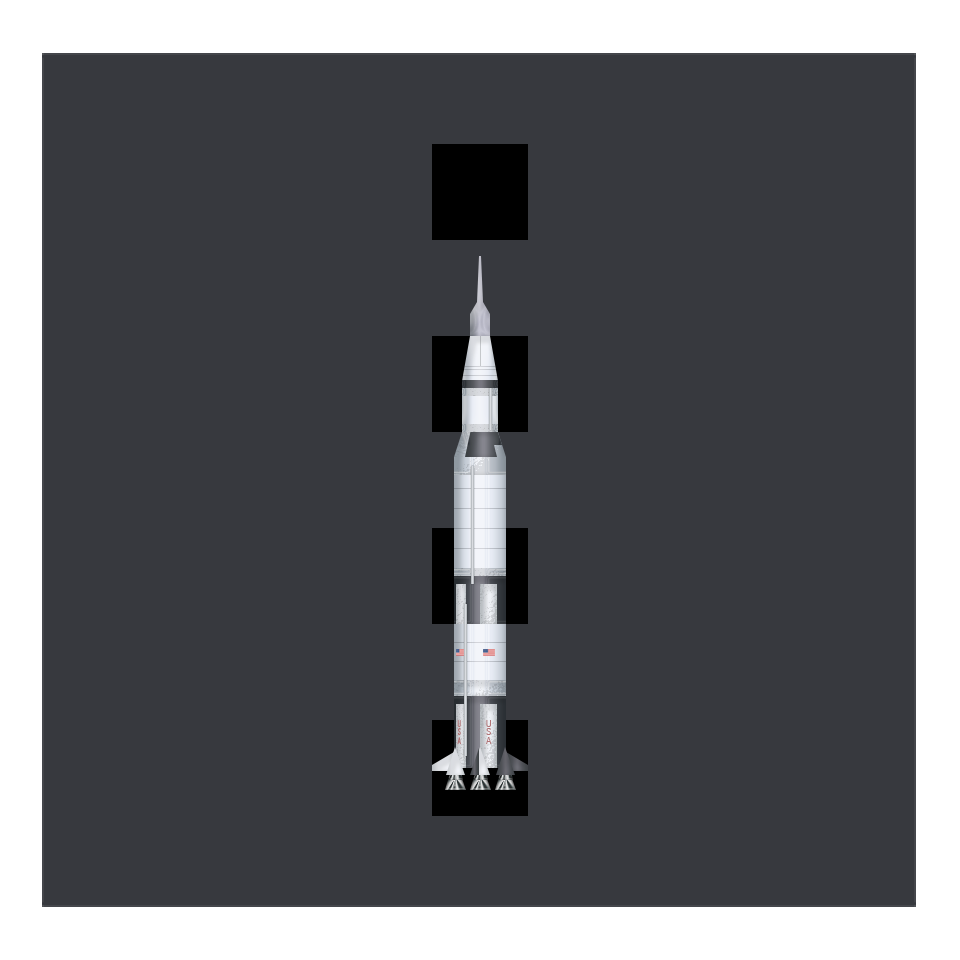
<style>
.page{position:relative;width:960px;height:960px;background:#37393e}
.page>*{position:absolute;margin:0}
.t1{font:9.4px/8.3px "PTMono-Regular";color:#b27375;scale:0.53 1}
.t2{font:9.4px/8.3px "PTMono-Regular";color:#b27375}
</style>
<div class="page">
<p class="t1" style="left:457px;top:720px;width:4px;height:25px;text-align:center">U<br>S<br>A</p>
<p class="t2" style="left:486px;top:720px;width:6px;height:24px;text-align:center">U<br>S<br>A</p>
</div>
